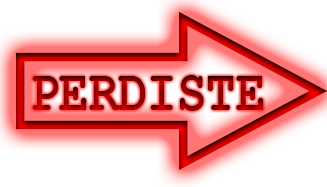
<style>
.page{position:relative;width:327px;height:187px;background:#ffffff}
.page>*{position:absolute;margin:0}
.t1{font:58.3px "CourierNewPS-BoldMT";scale:0.84 1}
</style>
<div class="page">
<p class="t1" style="left:32px;top:75px;width:232px;height:36px">PERDISTE</p>
</div>
